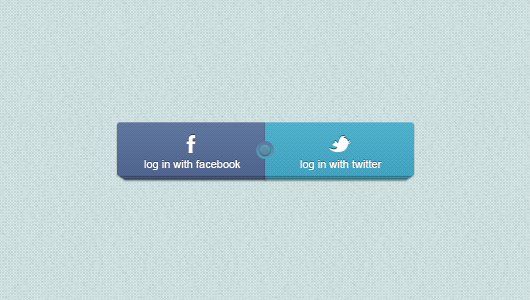
<style>
.page{position:relative;width:530px;height:300px}
.page>*{position:absolute;margin:0}
.t1{font:11px "ArialMT";color:#ffffff}
</style>
<div class="page">
<p class="t1" style="left:144px;top:160px;width:97px;height:10px">log in with facebook</p>
<p class="t1" style="left:300px;top:160px;width:82px;height:10px">log in with twitter</p>
</div>
